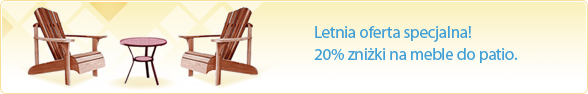
<style>
.page{position:relative;width:588px;height:94px}
.page>*{position:absolute;margin:0}
.t1{font:17px/22px "MyriadPro-Regular";letter-spacing:-0.015em;color:#42a0d7}
</style>
<div class="page">
<p class="t1" style="left:314px;top:26px;width:203px;height:37px">Letnia oferta specjalna!<br>20% zniżki na meble do patio.</p>
</div>
